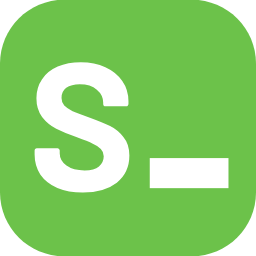
<style>
.page{position:relative;width:256px;height:256px;background:#6cc24a}
.page>*{position:absolute;margin:0}
.t1{font:181.9px "Barlow-Bold";color:#ffffff}
</style>
<div class="page">
<p class="t1" style="left:34px;top:62px;width:96px;height:131px">S</p>
</div>
